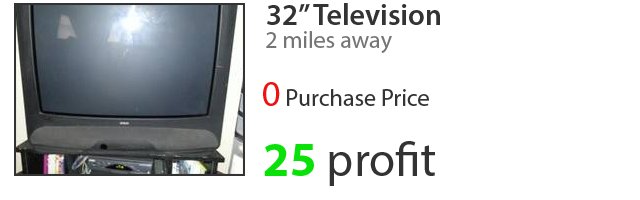
<style>
.page{position:relative;width:640px;height:200px;background:#ffffff}
.page>*{position:absolute;margin:0}
.t1{font:30px "MyriadPro-Semibold";color:#333333}
.t2{font:24px "MyriadPro-Regular";color:#767575}
.t3{font:24px "MyriadPro-Regular";color:#333333}
.t4{font:36px "MyriadPro-Regular";color:#ee1111}
.t5{font:48px "MyriadPro-Regular";color:#333333}
.t6{font:48px "MyriadPro-Bold";color:#09e109}
</style>
<div class="page">
<p class="t1" style="left:267px;top:3px;width:173px;height:22px">32” Television</p>
<p class="t2" style="left:266px;top:31px;width:126px;height:22px">2 miles away</p>
<p class="t3" style="left:263px;top:82px;width:166px;height:24px"><span class="t4">0 </span>Purchase Price</p>
<p class="t5" style="left:264px;top:141px;width:171px;height:45px"><span class="t6">25 </span>profit</p>
</div>
